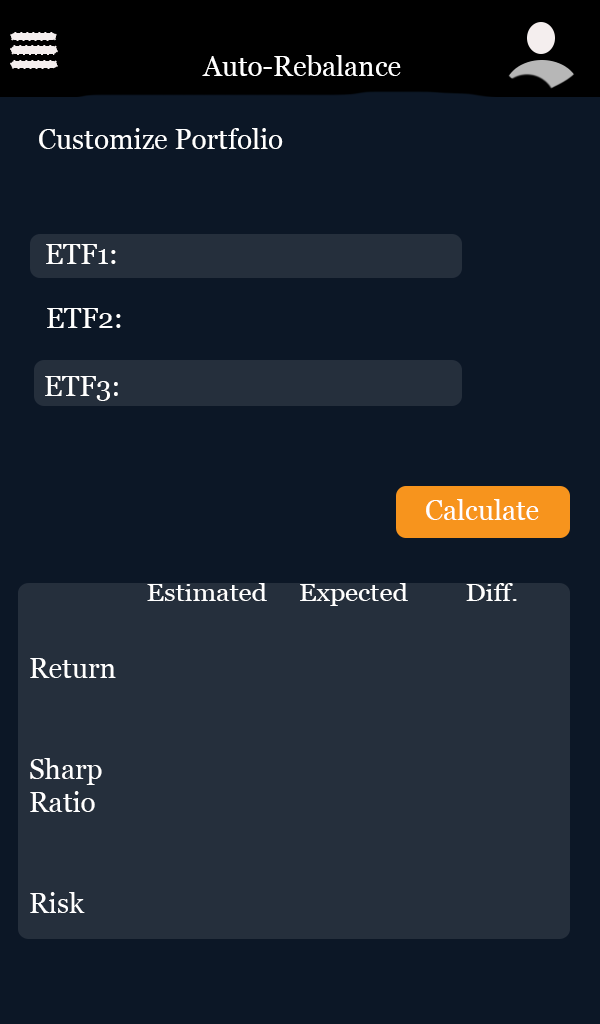
<style>
.page{position:relative;width:600px;height:1024px;background:#0c1726}
.page>*{position:absolute;margin:0}
.t1{font:28px "Georgia";color:#ffffff}
.t2{font:24px "Georgia";color:#ffffff;scale:1.11 1}
</style>
<div class="page">
<p class="t1" style="left:202px;top:55px;width:199px;height:21px">Auto-Rebalance</p>
<p class="t1" style="left:39px;top:128px;width:244px;height:21px">Customize Portfolio</p>
<p class="t1" style="left:46px;top:244px;width:70px;height:20px">ETF1:</p>
<p class="t1" style="left:47px;top:308px;width:74px;height:20px">ETF2:</p>
<p class="t1" style="left:45px;top:376px;width:73px;height:25px">ETF3:</p>
<p class="t1" style="left:426px;top:499px;width:113px;height:21px">Calculate</p>
<p class="t2" style="left:147px;top:583px;width:370px;height:23px">Estimated     Expected         Diff.</p>
<p class="t1" style="left:30px;top:658px;width:86px;height:255px">Return<br><br><br>Sharp <br>Ratio<br><br><br>Risk</p>
</div>
